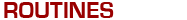
<style>
.page{position:relative;width:187px;height:20px;background:#ffffff}
.page>*{position:absolute;margin:0}
.t1{font:24px "EurostileBold";color:#990000}
</style>
<div class="page">
<p class="t1" style="left:4px;top:2px;width:110px;height:16px">ROUTINES</p>
</div>
